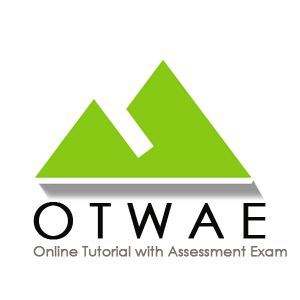
<style>
.page{position:relative;width:300px;height:300px;background:#ffffff}
.page>*{position:absolute;margin:0}
.t1{font:48.9px "CenturyGothic";letter-spacing:-0.02em;color:#0a0a09;font-weight:bold}
.t2{font:13.9px "CenturyGothic";letter-spacing:-0.02em;color:#77736b;font-weight:bold}
</style>
<div class="page">
<p class="t1" style="left:33px;top:202px;width:233px;height:38px">O T W A E</p>
<p class="t2" style="left:33px;top:246px;width:254px;height:11px">Online Tutorial with Assessment Exam</p>
</div>
